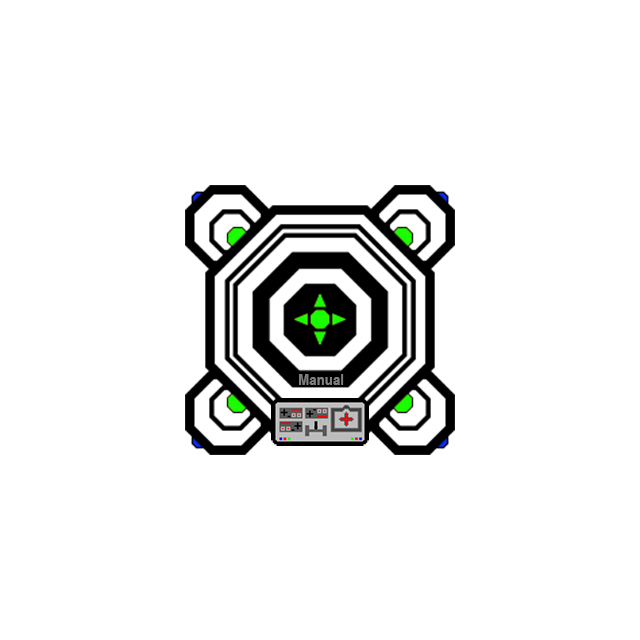
<style>
.page{position:relative;width:640px;height:640px;background:#ffffff}
.page>*{position:absolute;margin:0}
.t1{font:16.2px "ArialNarrow-Bold";color:#818181}
</style>
<div class="page">
<p class="t1" style="left:299px;top:374px;width:45px;height:11px">Manual</p>
</div>
